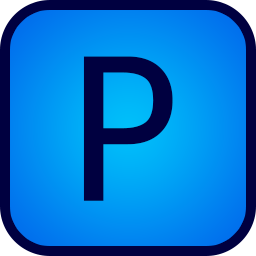
<style>
.page{position:relative;width:256px;height:256px;background:#000040}
.page>*{position:absolute;margin:0}
.t1{font:216px "SimHei";color:#000040}
</style>
<div class="page">
<p class="t1" style="left:83px;top:56px;width:90px;height:145px">P</p>
</div>
